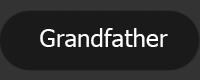
<style>
.page{position:relative;width:200px;height:80px;background:#1a1a1a}
.page>*{position:absolute;margin:0}
.t1{font:24px "Tahoma";color:#ffffff}
</style>
<div class="page">
<p class="t1" style="left:40px;top:28px;width:128px;height:19px">Grandfather</p>
</div>
